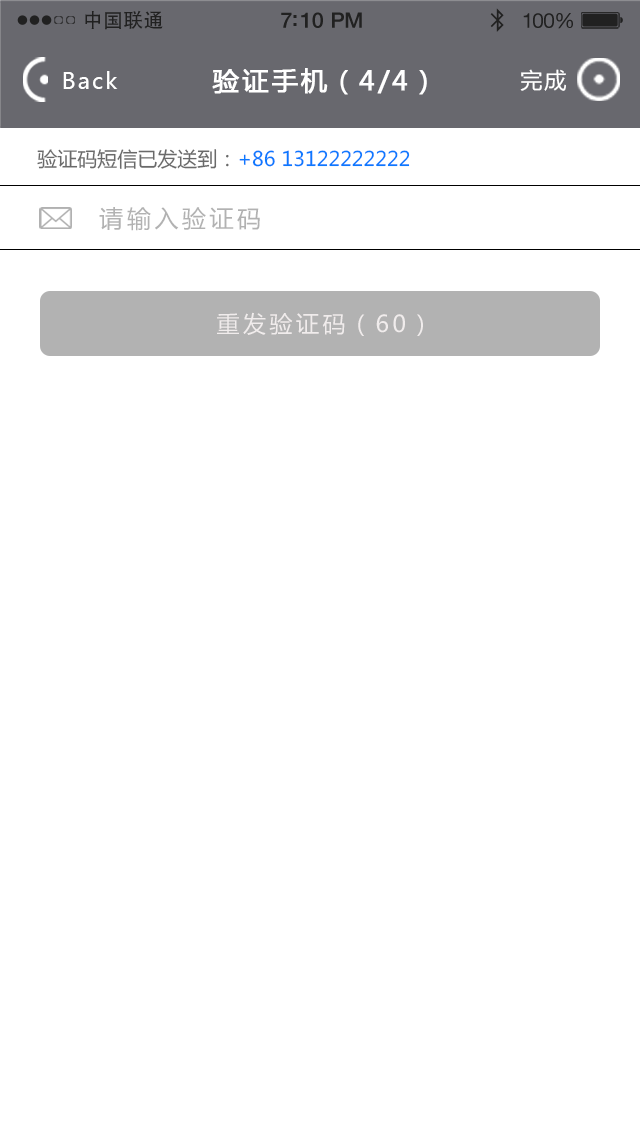
<style>
.page{position:relative;width:640px;height:1136px;background:#ffffff}
.page>*{position:absolute;margin:0}
.t1{font:19.7px "AdobeHeitiStd-Regular";letter-spacing:0.02em;color:#212121}
.t2{font:21.4px "HelveticaNeue-Medium";letter-spacing:-0.02em;color:#212121}
.t3{font:20.6px "HelveticaNeue";letter-spacing:-0.02em;color:#212121}
.t4{font:22px "MicrosoftYaHei";letter-spacing:0.1em;color:#ffffff}
.t5{font:26px "MicrosoftYaHei";letter-spacing:0.1em;color:#ffffff;font-weight:bold}
.t6{font:20px "MicrosoftYaHei";color:#0c79ff}
.t7{font:20px "MicrosoftYaHei";color:#6a6a6a}
.t8{font:24px "MicrosoftYaHei";letter-spacing:0.15em;color:#b2b2b2}
.t9{font:23px "MicrosoftYaHei";letter-spacing:0.15em;color:#f0ecec}
</style>
<div class="page">
<p class="t1" style="left:85px;top:10px;width:78px;height:20px">中国联通</p>
<p class="t2" style="left:281px;top:12px;width:81px;height:16px">7:10 PM</p>
<p class="t3" style="left:523px;top:13px;width:50px;height:16px">100%</p>
<p class="t4" style="left:63px;top:71px;width:55px;height:18px">Back</p>
<p class="t5" style="left:212px;top:68px;width:215px;height:27px">验证手机（4/4）</p>
<p class="t4" style="left:520px;top:69px;width:46px;height:22px">完成</p>
<p class="t6" style="left:37px;top:149px;width:373px;height:20px"><span class="t7">验证码短信已发送到：</span>+86 13122222222</p>
<p class="t8" style="left:99px;top:207px;width:161px;height:24px">请输入验证码</p>
<p class="t9" style="left:217px;top:312px;width:206px;height:24px">重发验证码（60）</p>
</div>
